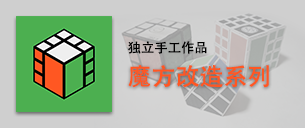
<style>
.page{position:relative;width:305px;height:128px}
.page>*{position:absolute;margin:0}
.t1{font:13.3px "AdobeHeitiStd-Regular";color:#000000}
.t2{font:24px "AdobeHeitiStd-Regular";color:#ff5722}
</style>
<div class="page">
<p class="t1" style="left:128px;top:41px;width:79px;height:13px">独立手工作品</p>
<p class="t2" style="left:128px;top:65px;width:141px;height:23px">魔方改造系列</p>
</div>
